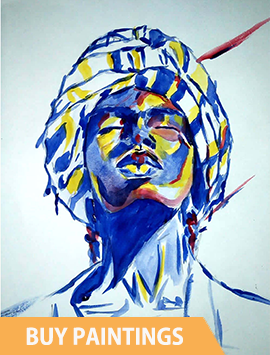
<style>
.page{position:relative;width:270px;height:355px}
.page>*{position:absolute;margin:0}
.t1{font:22px "KozGoPr6N-Bold";color:#f9f8f7}
</style>
<div class="page">
<p class="t1" style="left:26px;top:327px;width:157px;height:18px">BUY PAINTINGS</p>
</div>
